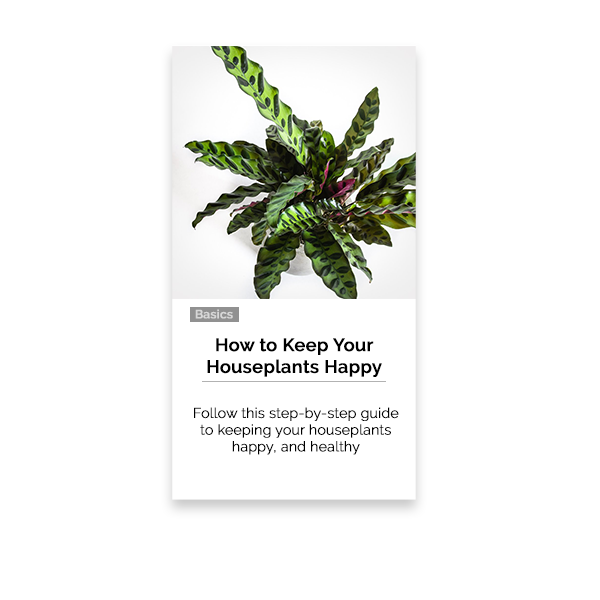
<style>
.page{position:relative;width:600px;height:600px;background:#ffffff}
.page>*{position:absolute;margin:0}
.t1{font:12px "Raleway-SemiBold";color:#d7d7d7;font-weight:bold}
.t2{font:18px "Raleway-SemiBold";color:#000000;font-weight:bold}
.t3{font:14px "Raleway-Light";color:#000000;font-weight:bold}
</style>
<div class="page">
<p class="t1" style="left:195px;top:309px;width:38px;height:10px">Basics</p>
<p class="t2" style="left:207px;top:338px;width:175px;height:39px;text-align:center">How to Keep Your<br>Houseplants Happy</p>
<p class="t3" style="left:194px;top:407px;width:205px;height:48px;text-align:center">Follow this step-by-step guide<br>to keeping your houseplants<br>happy, and healthy</p>
</div>
